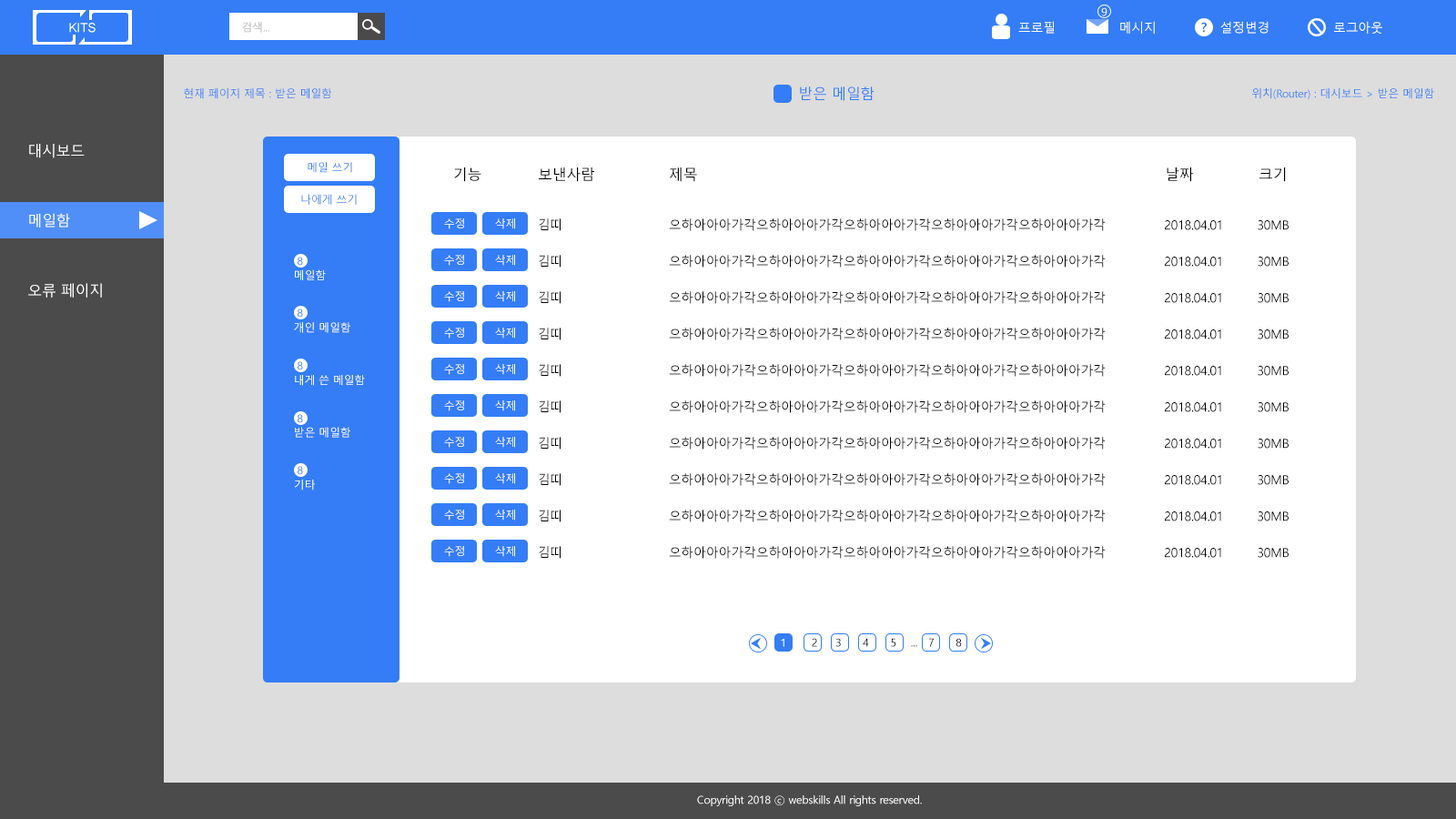
<style>
.page{position:relative;width:1456px;height:819px;background:#ffffff}
.page>*{position:absolute;margin:0}
.t1{font:10.9px "MalgunGothic";letter-spacing:-0.02em;color:#ffffff}
.t2{font:10.9px "MalgunGothic";letter-spacing:-0.02em}
.t3{font:12.7px "MalgunGothic";letter-spacing:-0.02em;color:#ffffff}
.t4{font:12.7px "MalgunGothicBold";letter-spacing:-0.02em;color:#347df6}
.t5{font:10.9px "MalgunGothic";letter-spacing:-0.02em;color:#347df6}
.t6{font:14.6px "MalgunGothic";letter-spacing:-0.02em;color:#347df6}
.t7{font:14.6px "MalgunGothic";letter-spacing:-0.02em;color:#ffffff}
.t8{font:14.6px "MalgunGothic";letter-spacing:-0.02em;color:#000000}
.t9{font:12.7px "MalgunGothic";letter-spacing:-0.02em;color:#000000}
.t10{font:10.9px "MalgunGothic";letter-spacing:-0.02em;color:#000000}
</style>
<div class="page">
<p class="t1" style="left:1101px;top:7px;width:6px;height:9px">9</p>
<p class="t2" style="left:242px;top:22px;width:27px;height:11px">검색...</p>
<p class="t3" style="left:1018px;top:21px;width:364px;height:13px">프로필               메시지               설정변경               로그아웃</p>
<p class="t4" style="left:1201px;top:22px;width:6px;height:11px">?</p>
<p class="t5" style="left:184px;top:88px;width:148px;height:11px">현재 페이지 제목 : 받은 메일함</p>
<p class="t6" style="left:800px;top:86px;width:74px;height:15px">받은 메일함</p>
<p class="t5" style="left:1252px;top:88px;width:182px;height:11px">위치(Router) : 대시보드 &gt; 받은 메일함</p>
<p class="t7" style="left:28px;top:144px;width:74px;height:154px">대시보드<br><br><br><br>메일함<br><br><br><br>오류 페이지</p>
<p class="t5" style="left:308px;top:162px;width:44px;height:11px">메일 쓰기</p>
<p class="t8" style="left:454px;top:167px;width:832px;height:15px">기능       보낸사람          제목                   날짜      크기</p>
<p class="t2" style="left:301px;top:194px;width:56px;height:11px">나에게 쓰기</p>
<p class="t1" style="left:444px;top:218px;width:20px;height:11px">수정</p>
<p class="t1" style="left:495px;top:218px;width:20px;height:11px">삭제</p>
<p class="t9" style="left:539px;top:218px;width:750px;height:13px">김띠     으하아아아가각으하아아아가각으하아아아가각으하아아아가각으하아아아가각   2018.04.01        30MB</p>
<p class="t5" style="left:298px;top:257px;width:5px;height:9px">8</p>
<p class="t1" style="left:444px;top:255px;width:20px;height:11px">수정</p>
<p class="t1" style="left:495px;top:255px;width:20px;height:11px">삭제</p>
<p class="t9" style="left:539px;top:255px;width:750px;height:13px">김띠     으하아아아가각으하아아아가각으하아아아가각으하아아아가각으하아아아가각   2018.04.01        30MB</p>
<p class="t1" style="left:294px;top:269px;width:71px;height:221px">메일함<br><br><br><br>개인 메일함<br><br><br><br>내게 쓴 메일함<br><br><br><br>받은 메일함<br><br><br><br>기타</p>
<p class="t1" style="left:444px;top:291px;width:20px;height:11px">수정</p>
<p class="t1" style="left:495px;top:291px;width:20px;height:11px">삭제</p>
<p class="t9" style="left:539px;top:291px;width:750px;height:13px">김띠     으하아아아가각으하아아아가각으하아아아가각으하아아아가각으하아아아가각   2018.04.01        30MB</p>
<p class="t5" style="left:298px;top:308px;width:5px;height:10px">8</p>
<p class="t1" style="left:444px;top:328px;width:20px;height:11px">수정</p>
<p class="t1" style="left:495px;top:328px;width:20px;height:11px">삭제</p>
<p class="t9" style="left:539px;top:328px;width:750px;height:12px">김띠     으하아아아가각으하아아아가각으하아아아가각으하아아아가각으하아아아가각   2018.04.01        30MB</p>
<p class="t5" style="left:298px;top:361px;width:5px;height:9px">8</p>
<p class="t1" style="left:444px;top:364px;width:20px;height:11px">수정</p>
<p class="t1" style="left:495px;top:364px;width:20px;height:11px">삭제</p>
<p class="t9" style="left:539px;top:364px;width:750px;height:13px">김띠     으하아아아가각으하아아아가각으하아아아가각으하아아아가각으하아아아가각   2018.04.01        30MB</p>
<p class="t1" style="left:444px;top:400px;width:20px;height:11px">수정</p>
<p class="t1" style="left:495px;top:400px;width:20px;height:11px">삭제</p>
<p class="t9" style="left:539px;top:400px;width:750px;height:13px">김띠     으하아아아가각으하아아아가각으하아아아가각으하아아아가각으하아아아가각   2018.04.01        30MB</p>
<p class="t5" style="left:298px;top:414px;width:5px;height:9px">8</p>
<p class="t1" style="left:444px;top:437px;width:20px;height:11px">수정</p>
<p class="t1" style="left:495px;top:437px;width:20px;height:11px">삭제</p>
<p class="t9" style="left:539px;top:437px;width:750px;height:13px">김띠     으하아아아가각으하아아아가각으하아아아가각으하아아아가각으하아아아가각   2018.04.01        30MB</p>
<p class="t5" style="left:298px;top:466px;width:5px;height:9px">8</p>
<p class="t1" style="left:444px;top:473px;width:20px;height:11px">수정</p>
<p class="t1" style="left:495px;top:473px;width:20px;height:11px">삭제</p>
<p class="t9" style="left:539px;top:473px;width:750px;height:13px">김띠     으하아아아가각으하아아아가각으하아아아가각으하아아아가각으하아아아가각   2018.04.01        30MB</p>
<p class="t1" style="left:444px;top:510px;width:20px;height:11px">수정</p>
<p class="t1" style="left:495px;top:510px;width:20px;height:11px">삭제</p>
<p class="t9" style="left:539px;top:510px;width:750px;height:12px">김띠     으하아아아가각으하아아아가각으하아아아가각으하아아아가각으하아아아가각   2018.04.01        30MB</p>
<p class="t1" style="left:444px;top:546px;width:20px;height:11px">수정</p>
<p class="t1" style="left:495px;top:546px;width:20px;height:11px">삭제</p>
<p class="t9" style="left:539px;top:546px;width:750px;height:13px">김띠     으하아아아가각으하아아아가각으하아아아가각으하아아아가각으하아아아가각   2018.04.01        30MB</p>
<p class="t10" style="left:781px;top:638px;width:181px;height:9px">1       2     3      4      5    ...   7      8</p>
<p class="t1" style="left:697px;top:795px;width:225px;height:11px">Copyright 2018 ⓒ webskills All rights reserved.</p>
</div>
